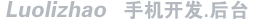
<style>
.page{position:relative;width:253px;height:20px;background:#ffffff}
.page>*{position:absolute;margin:0}
.t1{font:22px "FZDHTK--GBK1-0";color:#b3b9bf;font-style:italic}
.t2{font:20px "FZDHTK--GBK1-0";color:#b3b9bf}
</style>
<div class="page">
<p class="t1" style="left:6px;top:1px;width:100px;height:17px">Luolizhao</p>
<p class="t2" style="left:124px;top:0px;width:124px;height:20px">手机开发.后台</p>
</div>
